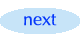
<style>
.page{position:relative;width:80px;height:40px;background:#c7e4f8}
.page>*{position:absolute;margin:0}
.t1{font:18px "Optima-Regular";color:#0538fa}
</style>
<div class="page">
<p class="t1" style="left:24px;top:14px;width:33px;height:12px">next</p>
</div>
